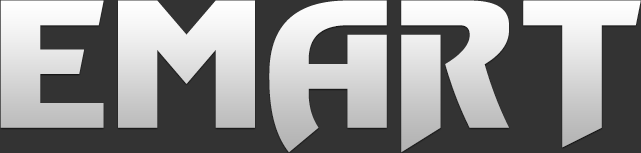
<style>
.page{position:relative;width:641px;height:153px;background:#333333}
.page>*{position:absolute;margin:0}
.t1{font:200px "Convoy"}
</style>
<div class="page">
<p class="t1" style="left:0px;top:0px;width:641px;height:153px">EMART</p>
</div>
